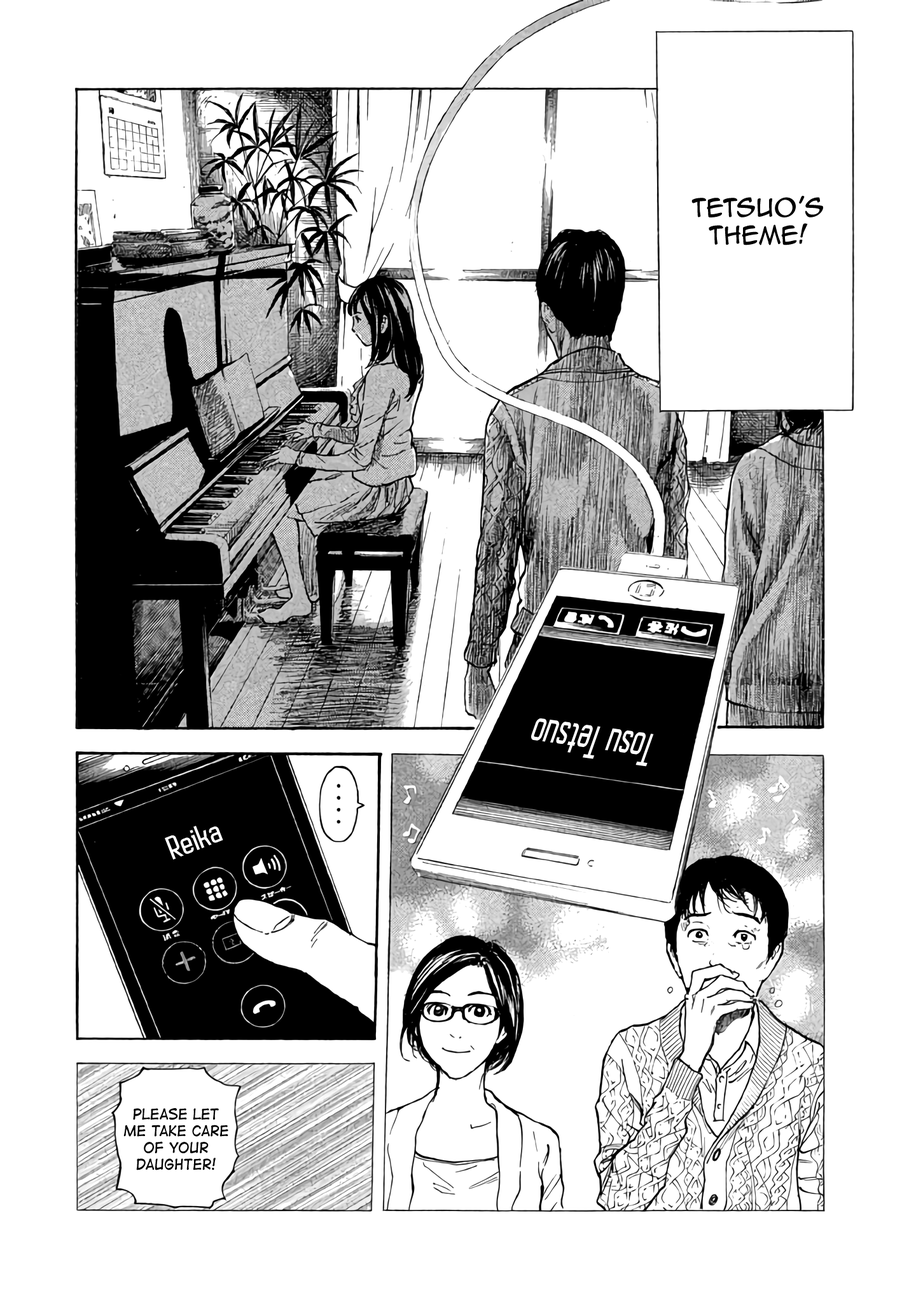
<style>
.page{position:relative;width:916px;height:1302px;background:#ffffff}
.page>*{position:absolute;margin:0}
.t1{font:22.9px "AnimeAce2.0BB";color:#000000}
.t2{font:44.6px "AutobusBold";color:#ffffff;scale:0.69 1}
.t3{font:30.5px "AutobusBold";color:#ffffff}
.t4{font:14px "DigitalStrip";color:#000000}
</style>
<div class="page">
<p class="t1" style="left:691px;top:196px;width:132px;height:49px;text-align:center">Tetsuo’s Theme!</p>
<p class="t2" style="left:531px;top:719px;width:123px;height:48px;rotate:-172deg">Tosu Tetsuo</p>
<p class="t3" style="left:165px;top:826px;width:58px;height:34px;rotate:-21deg">Reika</p>
<p class="t4" style="left:123px;top:1108px;width:105px;height:63px;text-align:center">Please let me take care of your daughter!</p>
</div>
